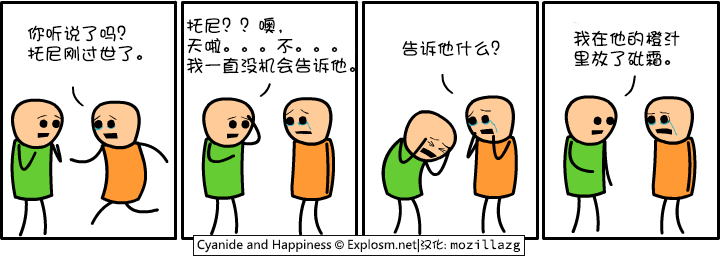
<style>
.page{position:relative;width:721px;height:256px;background:#ffffff}
.page>*{position:absolute;margin:0}
.t1{font:18px/20px "DFPShaoNvW5";color:#000000}
.t2{font:18px "DFPShaoNvW5";color:#000000}
</style>
<div class="page">
<p class="t1" style="left:186px;top:17px;width:170px;height:57px">托尼？？噢，<br>天啦。。。不。。。<br>我一直没机会告诉他。</p>
<p class="t1" style="left:27px;top:25px;width:116px;height:37px">你听说了吗？<br>托尼刚过世了。</p>
<p class="t1" style="left:573px;top:30px;width:107px;height:37px">我在他的橙汁<br>里放了砒霜。</p>
<p class="t2" style="left:402px;top:40px;width:98px;height:17px">告诉他什么？</p>
</div>
